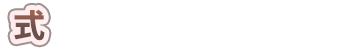
<style>
.page{position:relative;width:360px;height:50px;background:#ffffff}
.page>*{position:absolute;margin:0}
.t1{font:32px "SourceHanSansSC-Bold";font-weight:bold}
</style>
<div class="page">
<p class="t1" style="left:14px;top:9px;width:31px;height:32px">式</p>
</div>
